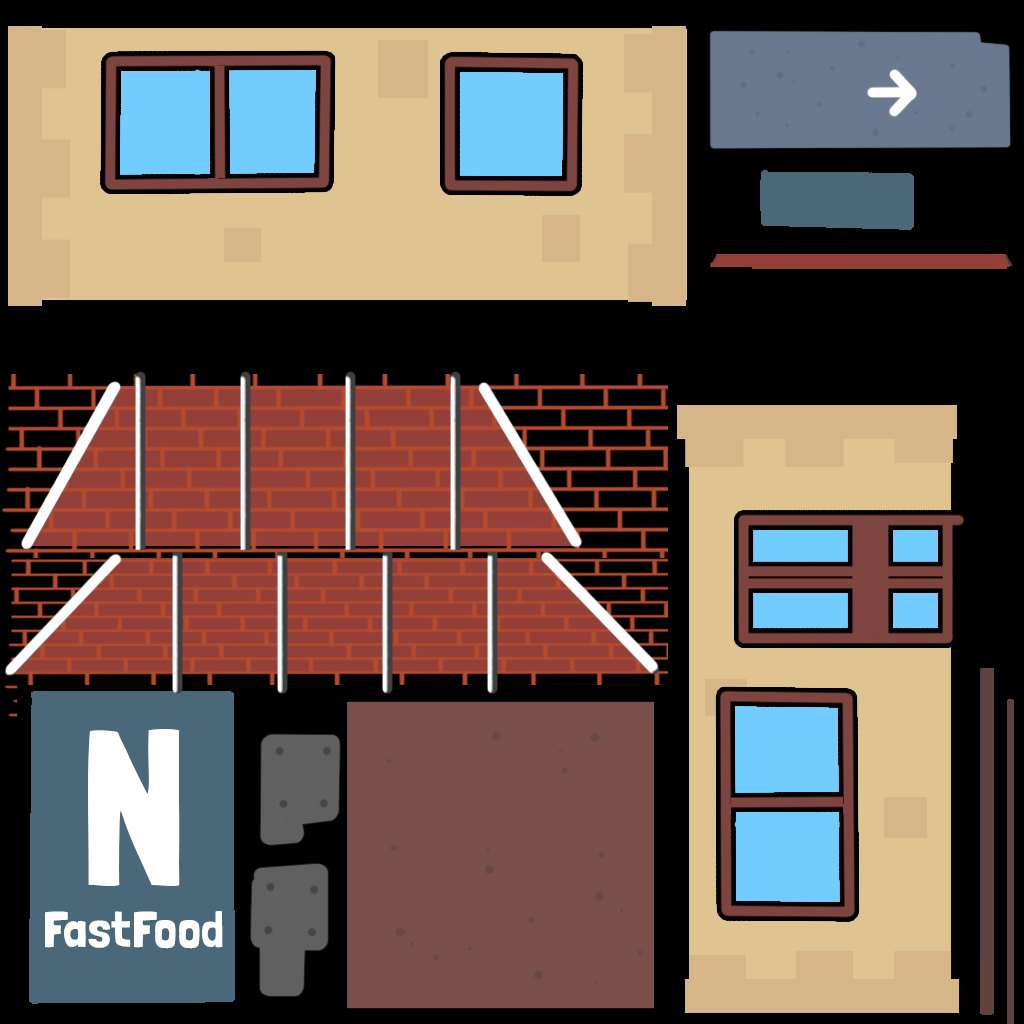
<style>
.page{position:relative;width:1024px;height:1024px;background:#000000}
.page>*{position:absolute;margin:0}
.t1{font:51px "LondrinaSolid-Regular";color:#ffffff}
.t2{font:219px "LondrinaSolid-Regular";color:#ffffff}
</style>
<div class="page">
<p class="t1" style="left:45px;top:729px;width:178px;height:220px;text-align:center"><span class="t2">N<br></span>FastFood</p>
</div>
